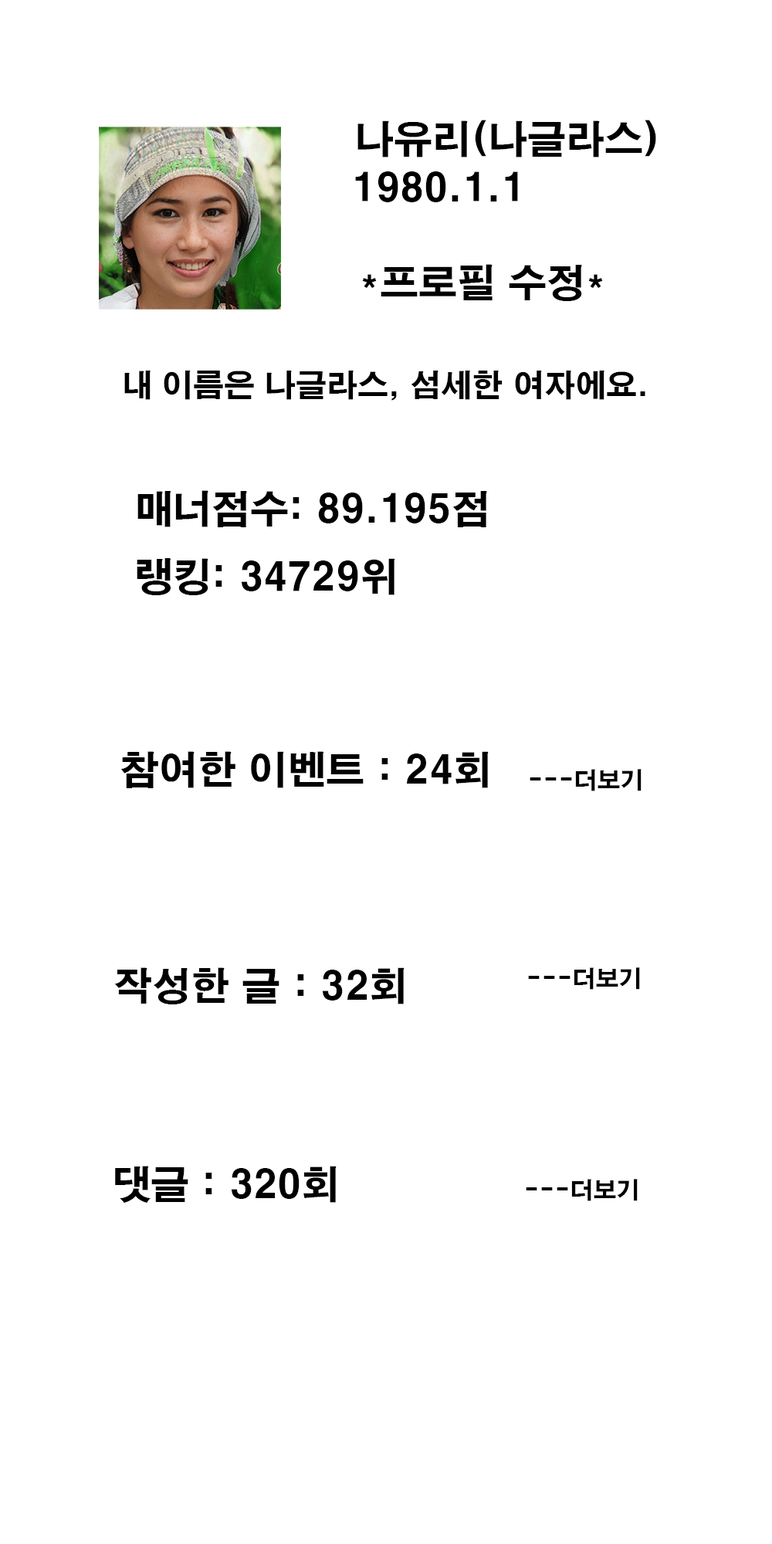
<style>
.page{position:relative;width:772px;height:1544px;background:#ffffff}
.page>*{position:absolute;margin:0}
.t1{font:38.6px "H2gtrE";color:#000000}
.t2{font:30.9px "H2gtrE";color:#000000}
.t3{font:23.2px "H2gtrE";color:#000000}
</style>
<div class="page">
<p class="t1" style="left:358px;top:120px;width:298px;height:38px">나유리(나글라스)</p>
<p class="t1" style="left:355px;top:171px;width:163px;height:31px">1980.1.1</p>
<p class="t1" style="left:362px;top:264px;width:241px;height:37px">*프로필 수정*</p>
<p class="t2" style="left:124px;top:371px;width:522px;height:30px">내 이름은 나글라스, 섬세한 여자에요.</p>
<p class="t1" style="left:137px;top:490px;width:350px;height:105px">매너점수: 89.195점<br>랭킹: 34729위</p>
<p class="t1" style="left:120px;top:751px;width:369px;height:37px">참여한 이벤트 : 24회</p>
<p class="t3" style="left:530px;top:769px;width:112px;height:22px">---더보기</p>
<p class="t1" style="left:114px;top:968px;width:291px;height:37px">작성한 글 : 32회</p>
<p class="t3" style="left:528px;top:968px;width:112px;height:22px">---더보기</p>
<p class="t1" style="left:115px;top:1166px;width:222px;height:37px">댓글 : 320회</p>
<p class="t3" style="left:526px;top:1179px;width:112px;height:22px">---더보기</p>
</div>
